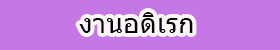
<style>
.page{position:relative;width:280px;height:50px;background:#c577e5}
.page>*{position:absolute;margin:0}
.t1{font:27.8px "Tahoma";color:#09020c}
</style>
<div class="page">
<p class="t1" style="left:79px;top:12px;width:114px;height:21px">งานอดิเรก</p>
</div>
